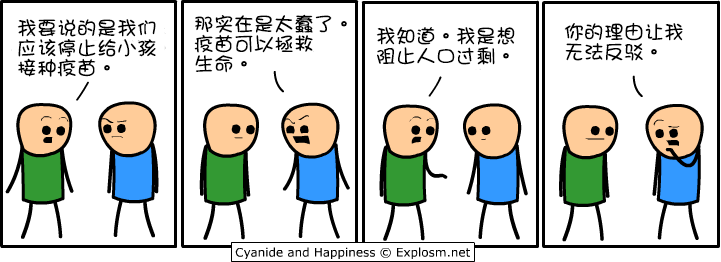
<style>
.page{position:relative;width:721px;height:262px;background:#ffffff}
.page>*{position:absolute;margin:0}
.t1{font:20px/20px "DFGirl";color:#000000}
</style>
<div class="page">
<p class="t1" style="left:194px;top:14px;width:153px;height:59px">那实在是太蠢了。<br>疫苗可以拯救<br>生命。</p>
<p class="t1" style="left:17px;top:19px;width:139px;height:58px">我要说的是我们<br>应该停止给小孩<br>接种疫苗。</p>
<p class="t1" style="left:376px;top:26px;width:139px;height:39px">我知道。我是想<br>阻止人口过剩。</p>
<p class="t1" style="left:564px;top:22px;width:119px;height:39px">你的理由让我<br>无法反驳。</p>
</div>
